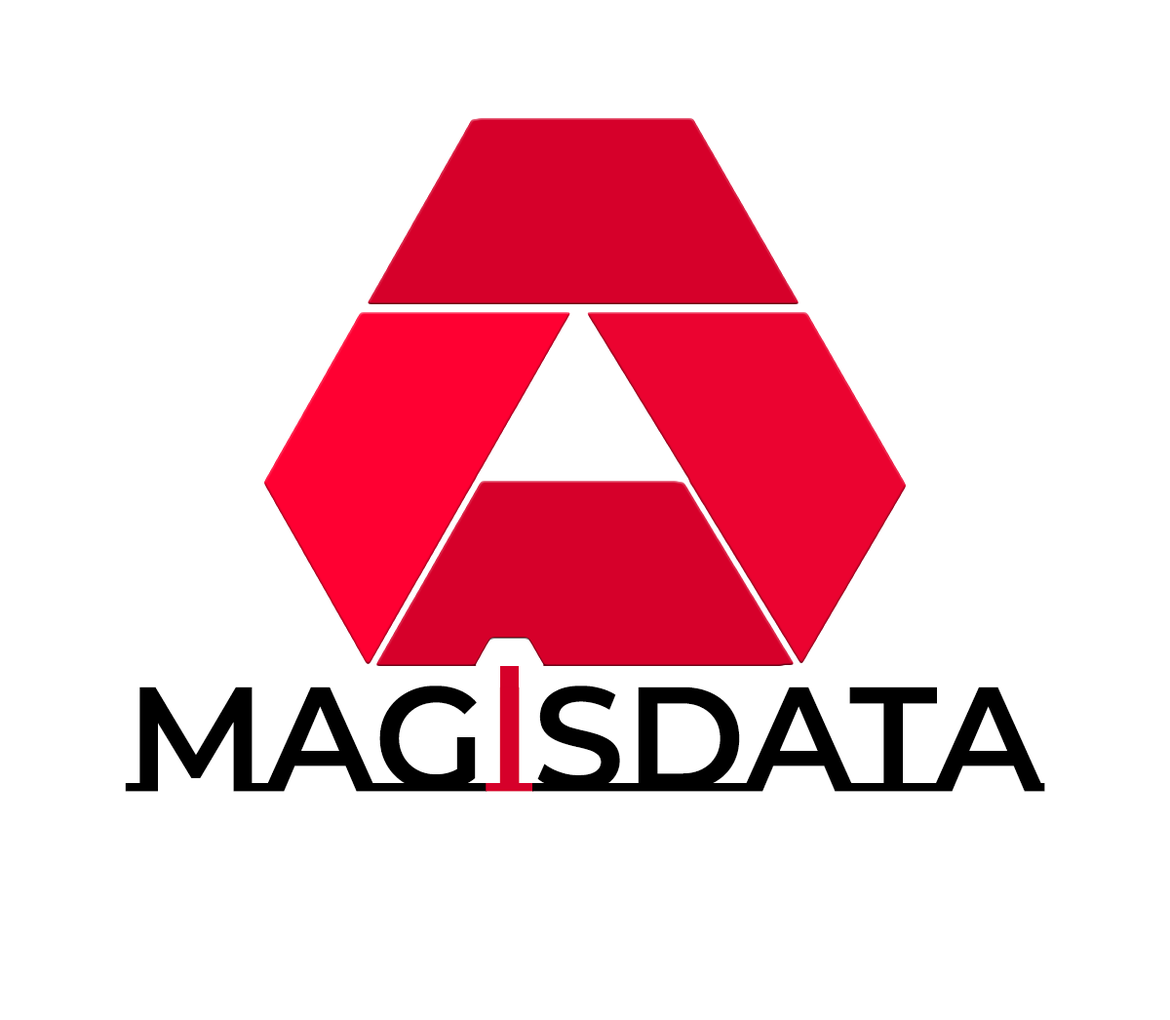
<style>
.page{position:relative;width:1170px;height:1020px;background:#ffffff}
.page>*{position:absolute;margin:0}
.t1{font:146.2px "MontserratUnderline-SemiBold";color:#000000}
.t2{font:146.2px "MontserratUnderline-SemiBold";color:#d6002a}
</style>
<div class="page">
<p class="t1" style="left:125px;top:685px;width:920px;height:106px">MAG<span class="t2">I</span>SDATA</p>
</div>
